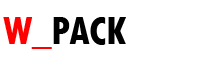
<style>
.page{position:relative;width:200px;height:60px;background:#ffffff}
.page>*{position:absolute;margin:0}
.t1{font:41.1px "TwCenMT-CondensedExtraBold";color:#000000;scale:0.94 1}
.t2{font:41.1px "TwCenMT-CondensedExtraBold";color:#fe0000;scale:0.94 1}
</style>
<div class="page">
<p class="t1" style="left:3px;top:17px;width:123px;height:32px"><span class="t2">W_</span>PACK</p>
</div>
